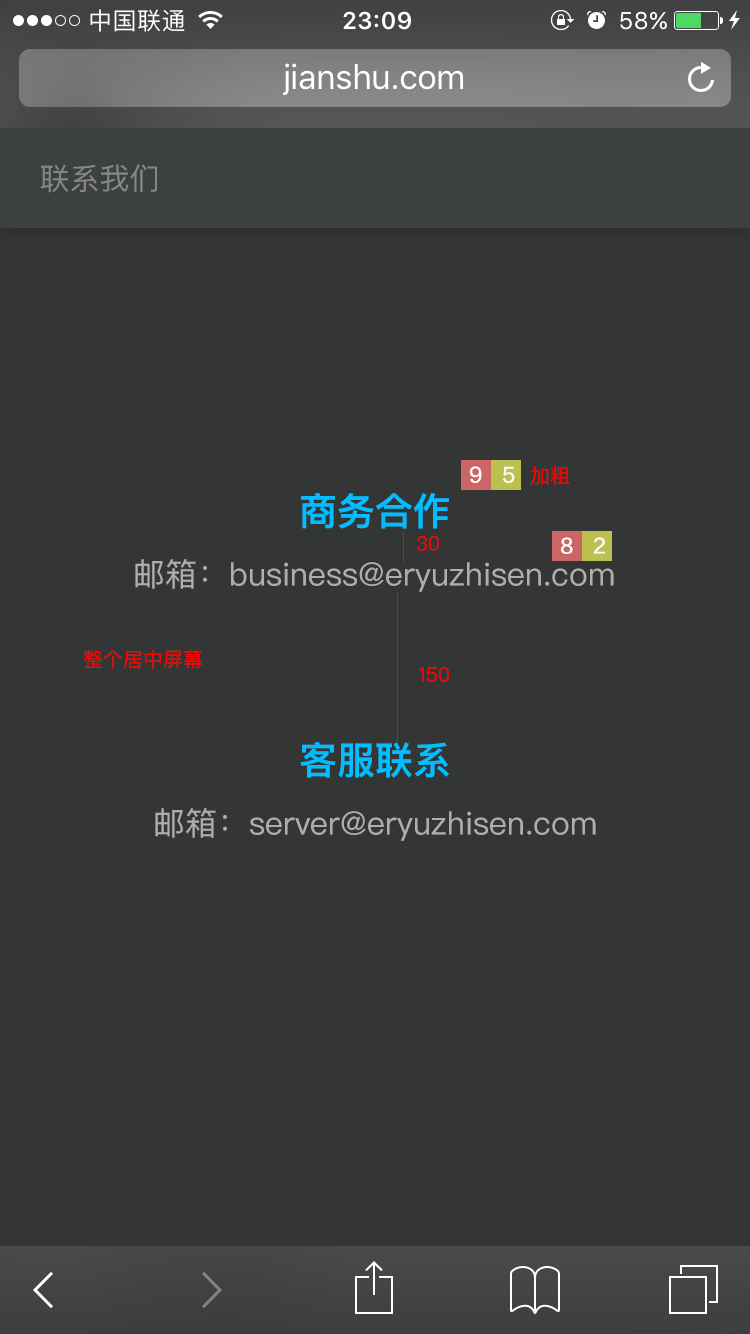
<style>
.page{position:relative;width:750px;height:1334px;background:#343636}
.page>*{position:absolute;margin:0}
.t1{font:30px "PingFangSC-Regular";color:#868686}
.t2{font:20px "FZLTZHK--GBK1-0";color:#ffffff}
.t3{font:20px "PingFangSC-Regular";color:#ff0000}
.t4{font:38px "PingFangSC-Semibold";color:#00beff}
.t5{font:32px "PingFangSC-Regular";color:#aeaeae}
</style>
<div class="page">
<p class="t1" style="left:40px;top:164px;width:117px;height:29px">联系我们</p>
<p class="t1" style="left:41px;top:164px;width:116px;height:28px">关于我们</p>
<p class="t2" style="left:470px;top:466px;width:12px;height:17px">9</p>
<p class="t2" style="left:503px;top:466px;width:12px;height:17px">5</p>
<p class="t3" style="left:530px;top:466px;width:40px;height:19px">加粗</p>
<p class="t4" style="left:301px;top:493px;width:148px;height:36px">商务合作</p>
<p class="t3" style="left:417px;top:536px;width:22px;height:15px">30</p>
<p class="t2" style="left:561px;top:537px;width:12px;height:17px">8</p>
<p class="t2" style="left:593px;top:537px;width:12px;height:17px">2</p>
<p class="t5" style="left:135px;top:559px;width:479px;height:33px">邮箱：business@eryuzhisen.com</p>
<p class="t3" style="left:83px;top:650px;width:120px;height:19px">整个居中屏幕</p>
<p class="t3" style="left:418px;top:667px;width:31px;height:15px">150</p>
<p class="t4" style="left:300px;top:742px;width:149px;height:36px">客服联系</p>
<p class="t5" style="left:155px;top:808px;width:441px;height:33px">邮箱：server@eryuzhisen.com</p>
</div>
